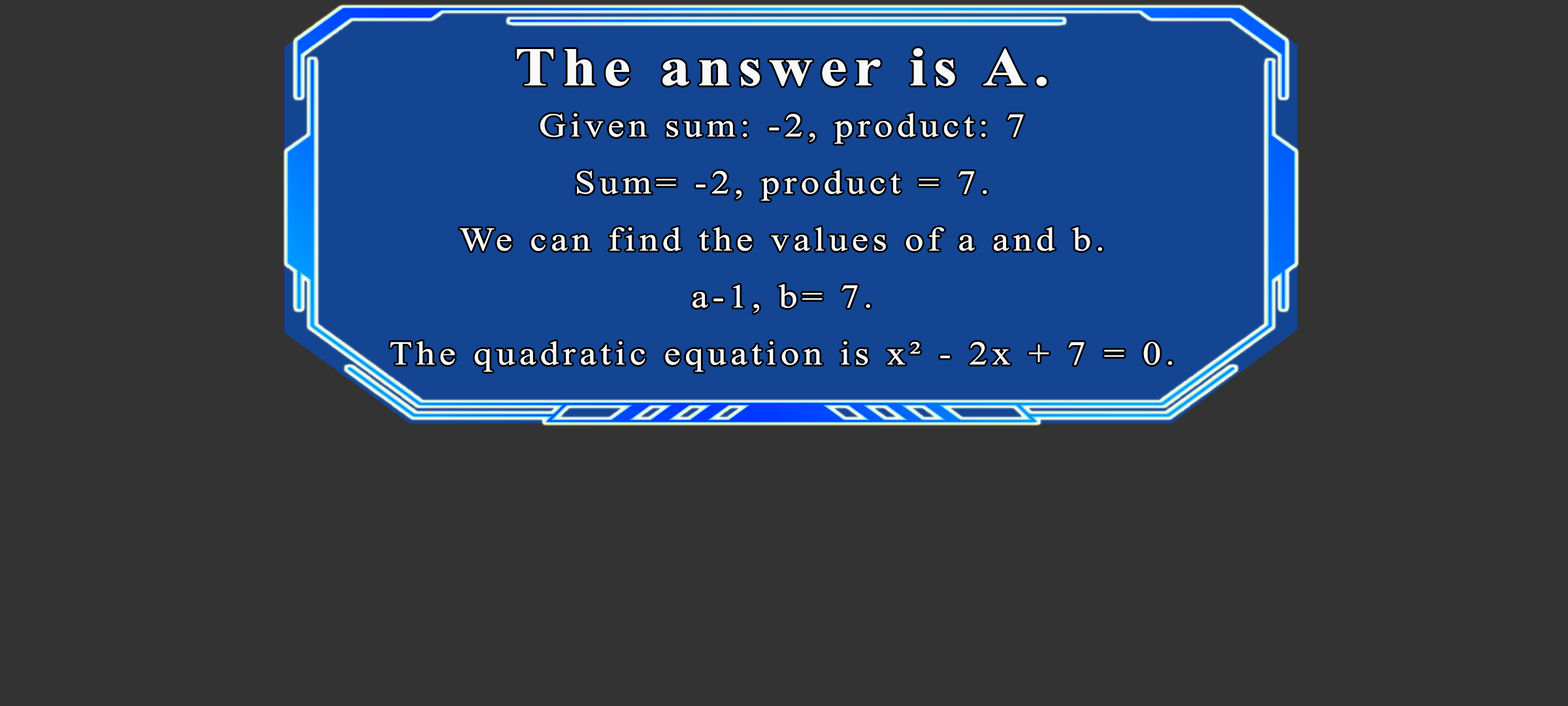
<style>
.page{position:relative;width:1568px;height:706px;background:#333333}
.page>*{position:absolute;margin:0}
.t1{font:54.4px "TimesNewRomanPS-BoldMT";letter-spacing:0.115em;color:#f7f9fb;scale:1.12 1}
.t2{font:33.2px/28.5px "TimesNewRomanPSMT";letter-spacing:0.115em;color:#f7f9fb;scale:1.12 1}
</style>
<div class="page">
<p class="t1" style="left:517px;top:48px;width:530px;height:38px">The answer is A.</p>
<p class="t2" style="left:390px;top:113px;width:782px;height:259px;text-align:center">Given sum: -2, product: 7<br><br>Sum= -2, product = 7.<br><br>We can find the values of a and b.<br><br>a-1, b= 7.<br><br>The quadratic equation is x² - 2x + 7 = 0.</p>
</div>
